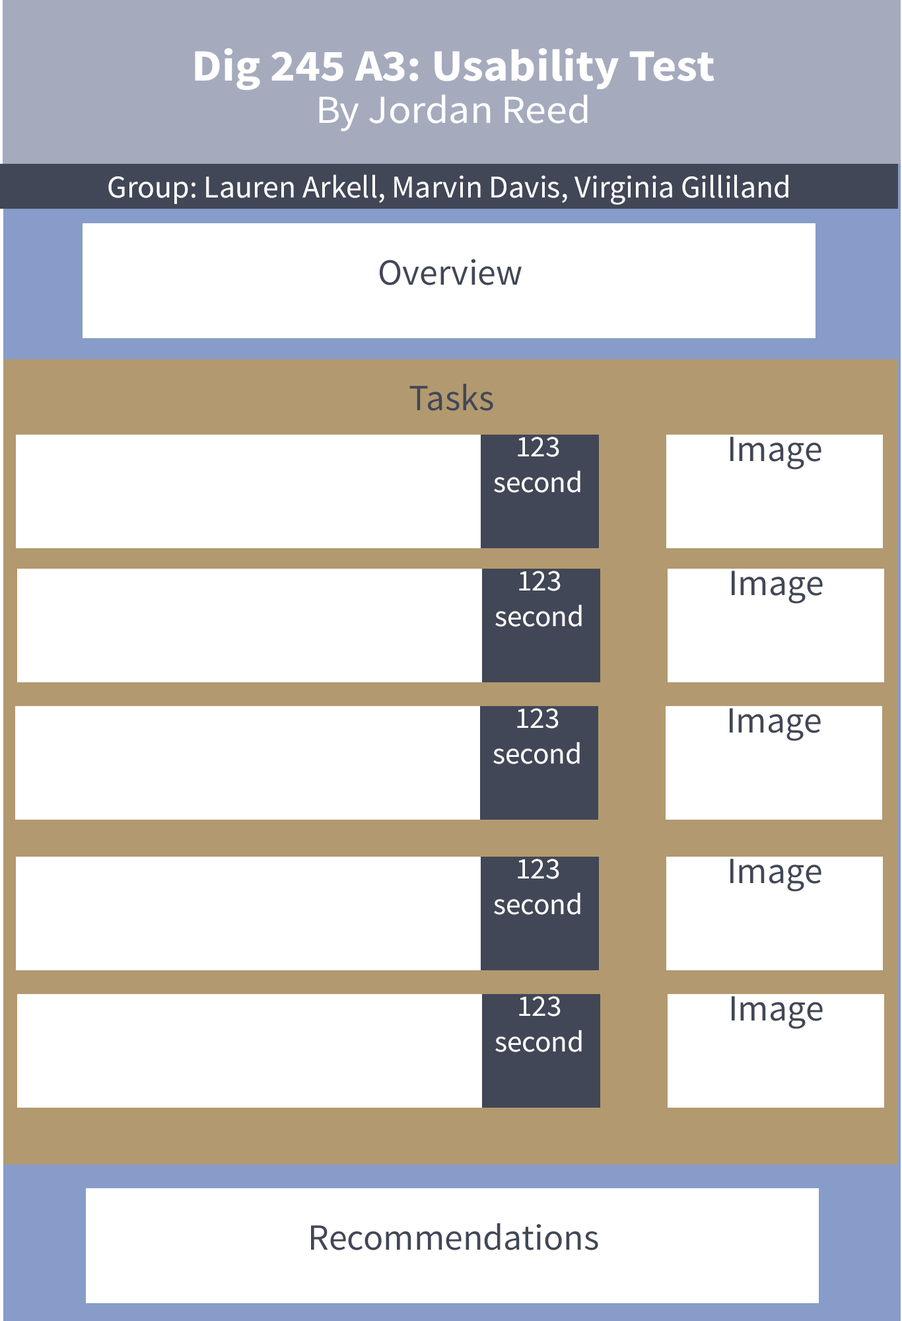
<style>
.page{position:relative;width:902px;height:1321px;background:#ffffff}
.page>*{position:absolute;margin:0}
.t1{font:44.8px "SourceSansRoman-Bold";color:#ffffff;scale:1.07 1}
.t2{font:39.6px "SourceSansRoman-Regular";color:#ffffff;scale:1.07 1}
.t3{font:31.7px "SourceSansRoman-Regular";color:#ffffff}
.t4{font:37px "SourceSansRoman-Regular";color:#414756}
.t5{font:29.9px "SourceSansRoman-Regular";color:#ffffff}
</style>
<div class="page">
<p class="t1" style="left:195px;top:48px;width:520px;height:43px;text-align:center">Dig 245 A3: Usability Test<br><br><br>by</p>
<p class="t2" style="left:319px;top:94px;width:269px;height:37px;text-align:center">By Jordan Reed<br><br><span class="t1"><br><br>by</span></p>
<p class="t3" style="left:108px;top:174px;width:681px;height:31px">Group: Lauren Arkell, Marvin Davis, Virginia Gilliland</p>
<p class="t4" style="left:380px;top:259px;width:142px;height:26px">Overview</p>
<p class="t4" style="left:410px;top:384px;width:84px;height:27px">Tasks</p>
<p class="t5" style="left:494px;top:437px;width:87px;height:56px;text-align:center">123 second</p>
<p class="t4" style="left:731px;top:437px;width:91px;height:33px">Image</p>
<p class="t5" style="left:495px;top:571px;width:87px;height:56px;text-align:center">123 second</p>
<p class="t4" style="left:732px;top:571px;width:91px;height:33px">Image</p>
<p class="t5" style="left:494px;top:708px;width:86px;height:56px;text-align:center">123 second</p>
<p class="t4" style="left:730px;top:708px;width:91px;height:33px">Image</p>
<p class="t5" style="left:494px;top:859px;width:87px;height:56px;text-align:center">123 second</p>
<p class="t4" style="left:731px;top:859px;width:91px;height:33px">Image</p>
<p class="t5" style="left:495px;top:996px;width:87px;height:56px;text-align:center">123 second</p>
<p class="t4" style="left:732px;top:996px;width:91px;height:33px">Image</p>
<p class="t4" style="left:311px;top:1224px;width:288px;height:27px">Recommendations</p>
</div>
